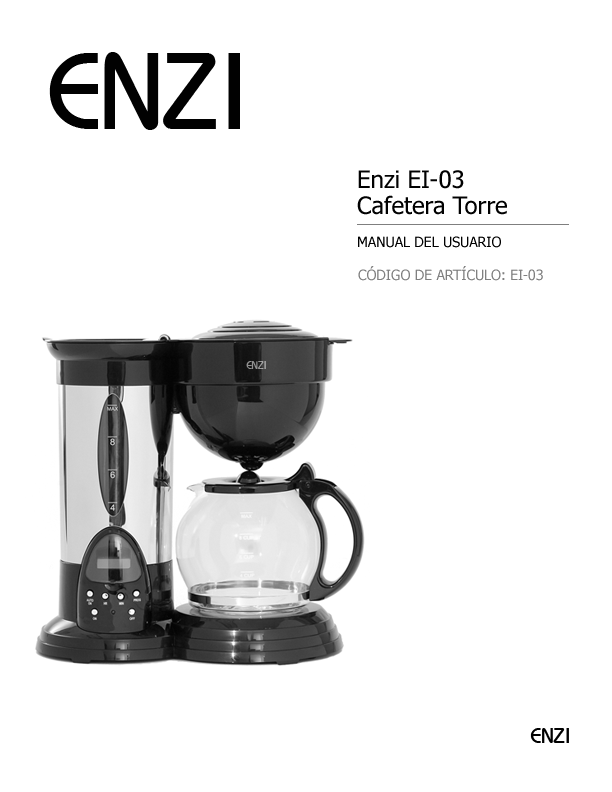
<style>
.page{position:relative;width:612px;height:792px;background:#ffffff}
.page>*{position:absolute;margin:0}
.t1{font:24px/26px "Tahoma";color:#010101}
.t2{font:14px "Tahoma";color:#010101;text-transform:uppercase}
.t3{font:14px "Tahoma";color:#808080;text-transform:uppercase}
</style>
<div class="page">
<p class="t1" style="left:357px;top:170px;width:150px;height:45px">Enzi EI-03 <br>Cafetera Torre</p>
<p class="t2" style="left:358px;top:236px;width:143px;height:12px">manual del usuario</p>
<p class="t3" style="left:358px;top:266px;width:185px;height:15px">código de artículo: EI-03</p>
</div>
